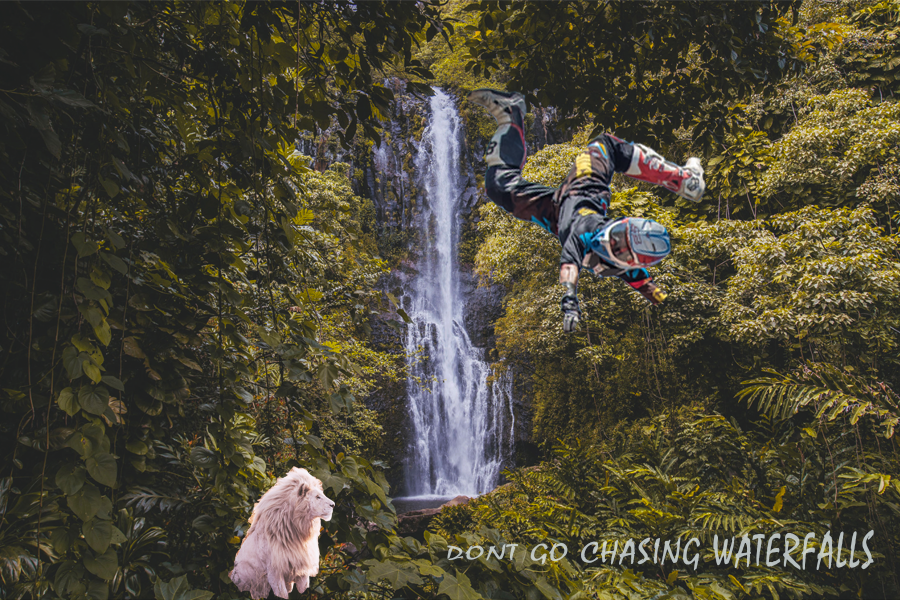
<style>
.page{position:relative;width:900px;height:600px}
.page>*{position:absolute;margin:0}
.t1{font:36px "Mistral";letter-spacing:0.05em;color:#b9c1bf}
</style>
<div class="page">
<p class="t1" style="left:447px;top:529px;width:427px;height:42px">DONT GO CHASING WATERFALLS</p>
</div>
